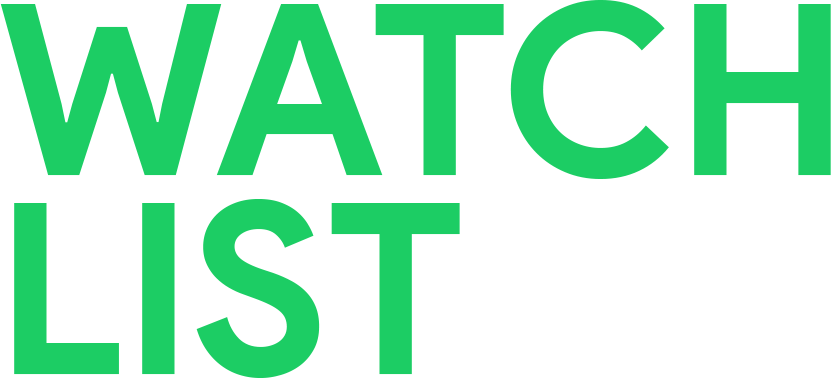
<style>
.page{position:relative;width:831px;height:378px;background:#ffffff}
.page>*{position:absolute;margin:0}
.t1{font:238.6px/198.4px "ProductSans-Bold";color:#1ccd64}
</style>
<div class="page">
<p class="t1" style="left:0px;top:0px;width:831px;height:378px">WATCH<br>LIST</p>
</div>
